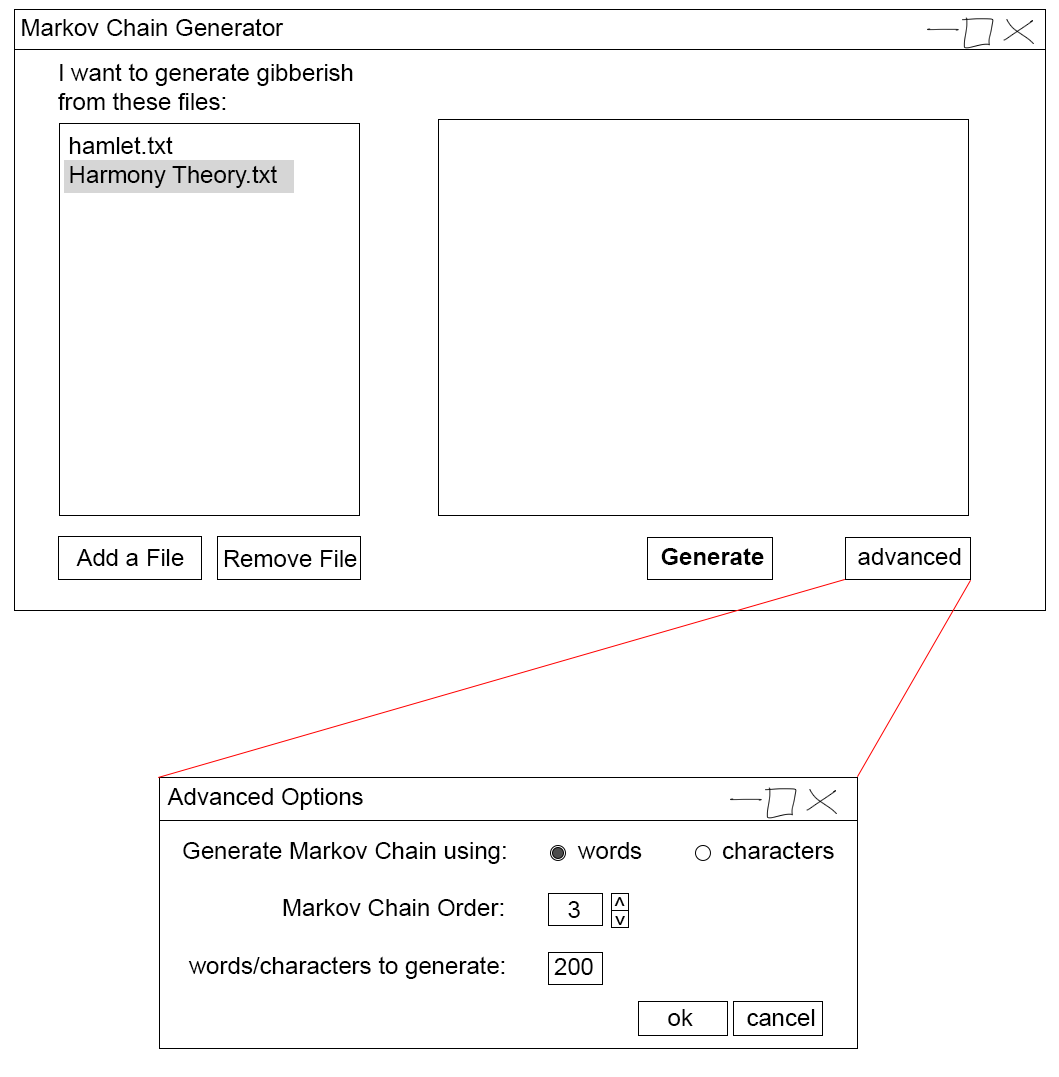
<style>
.page{position:relative;width:1059px;height:1077px;background:#ffffff}
.page>*{position:absolute;margin:0}
.t1{font:24px "ArialMT";color:#000000}
.t2{font:24px "Arial-BoldMT";color:#000000}
</style>
<div class="page">
<p class="t1" style="left:22px;top:18px;width:262px;height:18px">Markov Chain Generator</p>
<p class="t1" style="left:58px;top:63px;width:295px;height:47px">I want to generate gibberish from these files:</p>
<p class="t1" style="left:69px;top:136px;width:208px;height:52px">hamlet.txt<br>Harmony Theory.txt</p>
<p class="t1" style="left:76px;top:549px;width:108px;height:17px">Add a File</p>
<p class="t1" style="left:224px;top:550px;width:133px;height:17px">Remove File</p>
<p class="t2" style="left:661px;top:548px;width:103px;height:17px">Generate</p>
<p class="t1" style="left:858px;top:548px;width:103px;height:17px">advanced</p>
<p class="t1" style="left:167px;top:787px;width:196px;height:23px">Advanced Options</p>
<p class="t1" style="left:183px;top:841px;width:651px;height:138px">Generate Markov Chain using:  words     characters<br><br>               Markov Chain Order:  <br><br> words/characters to generate:</p>
<p class="t1" style="left:568px;top:901px;width:12px;height:17px">3</p>
<p class="t1" style="left:614px;top:897px;width:11px;height:9px">^</p>
<p class="t1" style="left:615px;top:916px;width:10px;height:9px;rotate:180deg">^</p>
<p class="t1" style="left:554px;top:958px;width:39px;height:17px">200</p>
<p class="t1" style="left:668px;top:1009px;width:147px;height:17px">ok    cancel</p>
</div>
